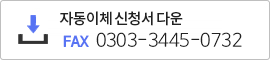
<style>
.page{position:relative;width:270px;height:60px;background:#ffffff}
.page>*{position:absolute;margin:0}
.t1{font:15px "NotoSansCJKkr-Medium";letter-spacing:-0.05em;color:#222222}
.t2{font:18px "NanumBarunGothicOTFLight";color:#222222}
.t3{font:14px "NanumBarunGothicOTFBold";color:#5773f3}
</style>
<div class="page">
<p class="t1" style="left:59px;top:11px;width:124px;height:15px">자동이체 신청서 다운</p>
<p class="t2" style="left:63px;top:32px;width:179px;height:15px"><span class="t3">FAX  </span>0303-3445-0732</p>
</div>
